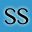
<style>
.page{position:relative;width:32px;height:32px;background:#3399cc}
.page>*{position:absolute;margin:0}
.t1{font:20px "BanglaMN";color:#000000}
</style>
<div class="page">
<p class="t1" style="left:4px;top:8px;width:25px;height:17px">SS</p>
</div>
